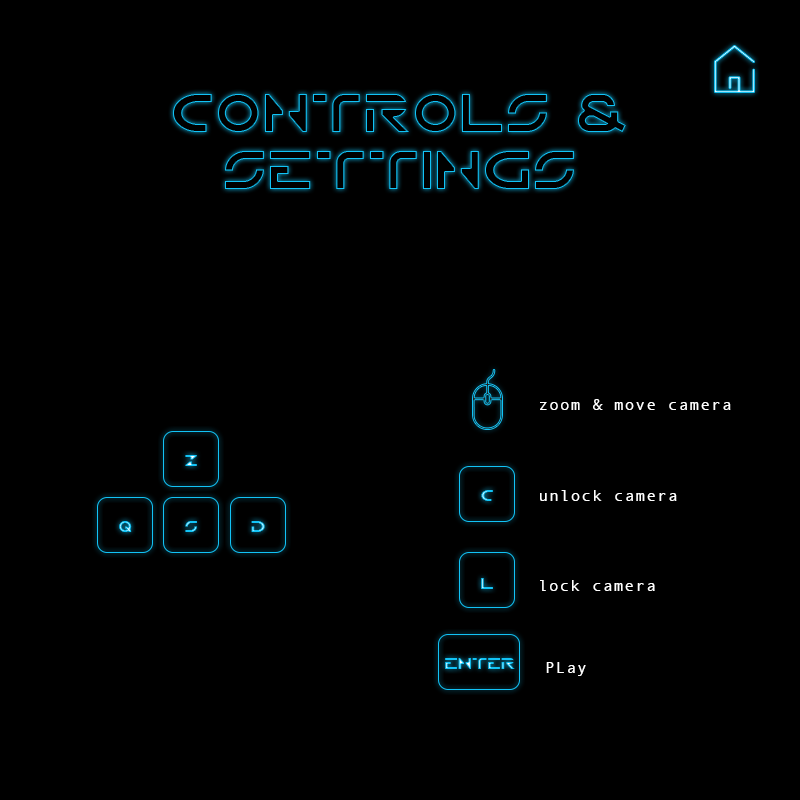
<style>
.page{position:relative;width:800px;height:800px;background:#000000}
.page>*{position:absolute;margin:0}
.t1{font:16px "AndaleMono";letter-spacing:0.075em;color:#ffffff}
.t2{font:14px "CRRNTN-Regular";letter-spacing:0.075em}
</style>
<div class="page">
<p class="t1" style="left:540px;top:399px;width:191px;height:11px">zoom &amp; move camera</p>
<p class="t2" style="left:185px;top:455px;width:12px;height:11px">Z</p>
<p class="t2" style="left:481px;top:490px;width:12px;height:11px">C</p>
<p class="t1" style="left:540px;top:490px;width:137px;height:11px">unlock camera</p>
<p class="t2" style="left:119px;top:521px;width:13px;height:11px">Q</p>
<p class="t2" style="left:185px;top:521px;width:12px;height:11px">S</p>
<p class="t2" style="left:251px;top:521px;width:14px;height:11px">D</p>
<p class="t2" style="left:481px;top:578px;width:12px;height:11px">l</p>
<p class="t1" style="left:540px;top:580px;width:115px;height:11px">lock camera</p>
<p class="t2" style="left:445px;top:658px;width:70px;height:11px">Enter</p>
<p class="t1" style="left:546px;top:662px;width:40px;height:14px">PLay</p>
</div>
